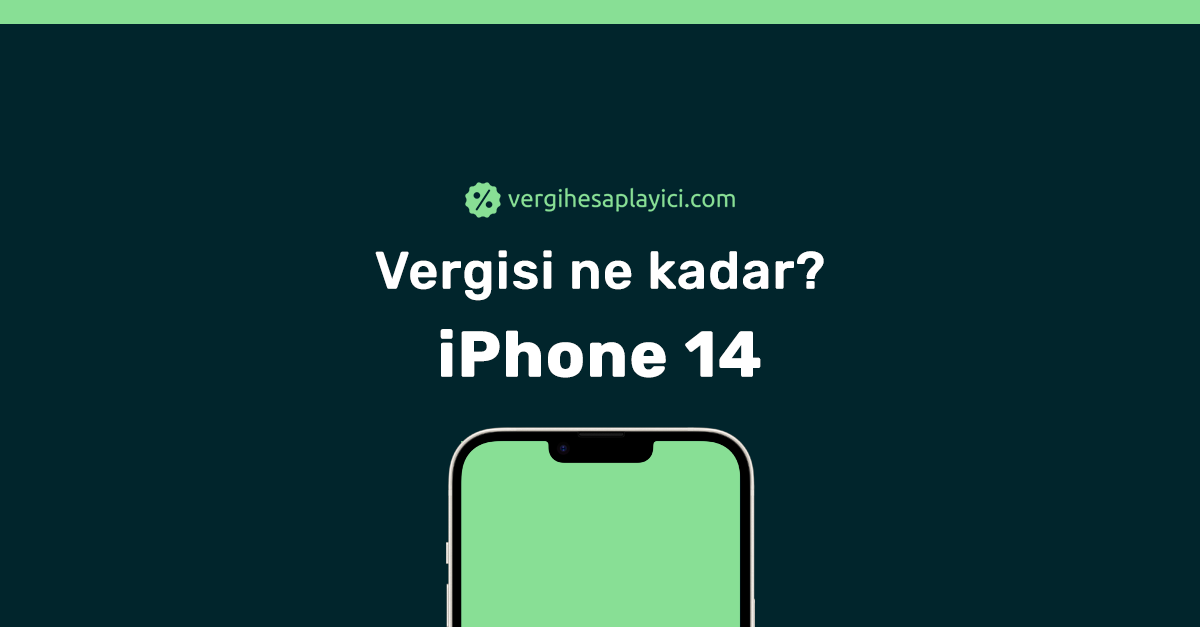
<style>
.page{position:relative;width:1200px;height:627px;background:#01252c}
.page>*{position:absolute;margin:0}
.t1{font:52px/88px "Rubik-Medium";color:#ffffff;font-weight:bold}
.t2{font:64px/88px "Rubik-Bold";color:#ffffff;font-weight:bold}
</style>
<div class="page">
<p class="t1" style="left:375px;top:250px;width:449px;height:128px;text-align:center">Vergisi ne kadar?<br><span class="t2">iPhone 14</span></p>
</div>
